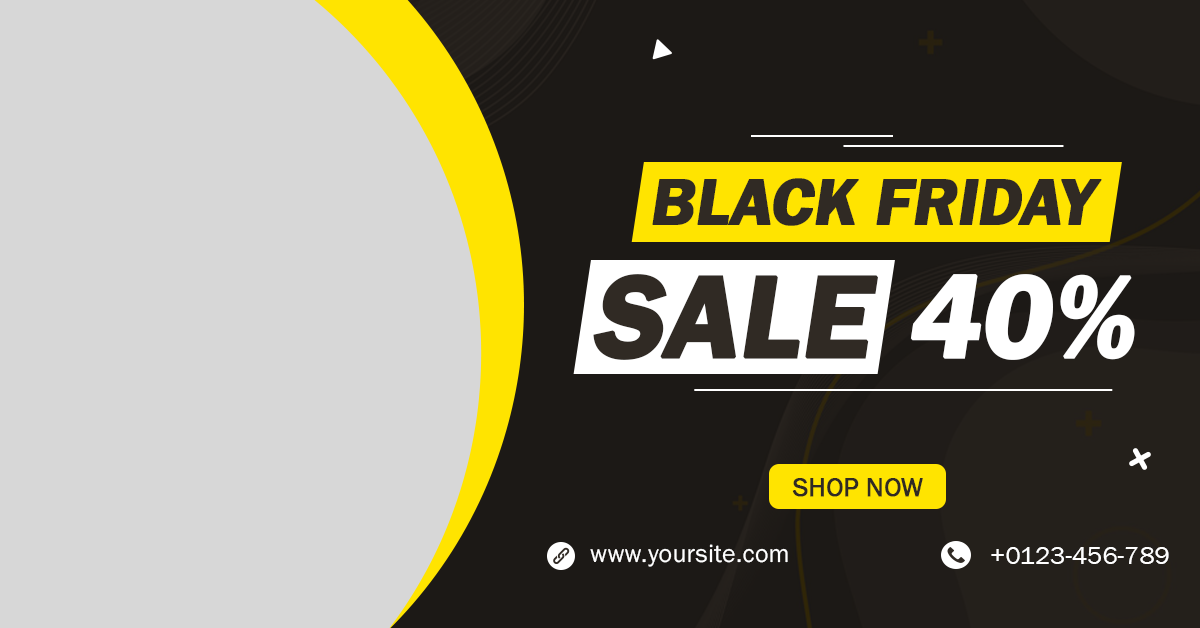
<style>
.page{position:relative;width:1200px;height:628px;background:#d7d7d7}
.page>*{position:absolute;margin:0}
.t1{font:68.2px "FranklinGothic-Demi";letter-spacing:-0.015em;color:#302a24;font-weight:bold}
.t2{font:121.4px "FranklinGothic-Demi";letter-spacing:-0.015em;color:#302a24;font-weight:bold}
.t3{font:121.4px "FranklinGothic-Demi";letter-spacing:-0.015em;color:#ffffff;font-weight:bold}
.t4{font:27px "FranklinGothic-Book";letter-spacing:-0.015em;color:#302a24;font-weight:bold}
.t5{font:26px "FranklinGothic-Book";letter-spacing:0.015em;color:#ffffff}
.t6{font:26px "FranklinGothic-Book";color:#ffffff}
</style>
<div class="page">
<p class="t1" style="left:652px;top:178px;width:450px;height:48px">BLACK FRIDAY</p>
<p class="t2" style="left:593px;top:274px;width:285px;height:86px">SALE</p>
<p class="t3" style="left:910px;top:274px;width:225px;height:86px">40%</p>
<p class="t4" style="left:792px;top:478px;width:131px;height:19px">SHOP NOW</p>
<p class="t5" style="left:590px;top:544px;width:198px;height:23px">www.yoursite.com</p>
<p class="t6" style="left:991px;top:547px;width:178px;height:17px">+0123-456-789</p>
</div>
